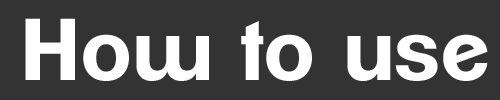
<style>
.page{position:relative;width:500px;height:100px;background:#333333}
.page>*{position:absolute;margin:0}
.t1{font:85px "ClementePDam-Bold";color:#ffffff}
</style>
<div class="page">
<p class="t1" style="left:25px;top:18px;width:463px;height:63px">How to use</p>
</div>
